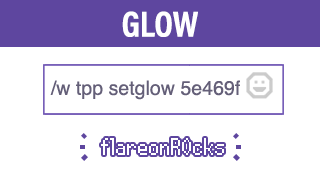
<style>
.page{position:relative;width:320px;height:180px;background:#ffffff}
.page>*{position:absolute;margin:0}
.t1{font:36.3px "AcuminProCond-Bold";color:#ffffff;text-transform:uppercase}
.t2{font:19.6px "Helvetica";color:#645f78}
.t3{font:24px "Power-Clear";color:#ffffff}
</style>
<div class="page">
<p class="t1" style="left:122px;top:11px;width:76px;height:26px">Glow</p>
<p class="t2" style="left:50px;top:80px;width:190px;height:20px">/w tpp setglow 5e469f</p>
<p class="t3" style="left:101px;top:138px;width:123px;height:17px">flareonR0cks</p>
</div>
